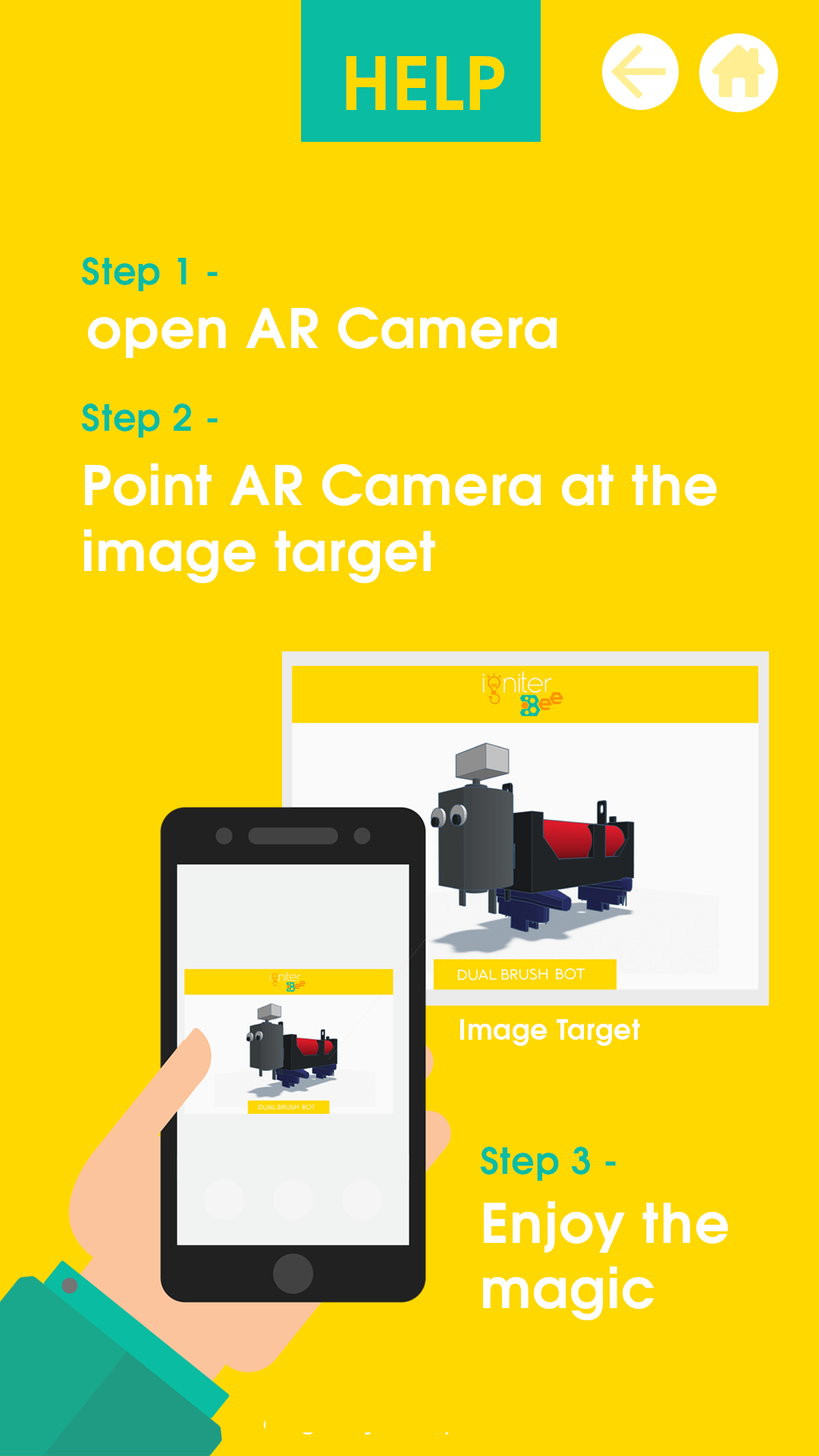
<style>
.page{position:relative;width:819px;height:1456px;background:#ffd800}
.page>*{position:absolute;margin:0}
.t1{font:72.8px "TeXGyreAdventor-Bold";letter-spacing:0.02em;color:#ffd800}
.t2{font:36.4px "TeXGyreAdventor-Bold";letter-spacing:0.02em;color:#0abca1}
.t3{font:54.6px "TeXGyreAdventor-Bold";letter-spacing:0.02em;color:#ffffff}
.t4{font:27.3px "TeXGyreAdventor-Bold";letter-spacing:0.02em;color:#ffffff}
</style>
<div class="page">
<p class="t1" style="left:346px;top:56px;width:158px;height:54px">HELP</p>
<p class="t2" style="left:81px;top:257px;width:137px;height:34px">Step 1 -</p>
<p class="t3" style="left:88px;top:307px;width:469px;height:51px">open AR Camera</p>
<p class="t2" style="left:81px;top:403px;width:137px;height:35px">Step 2 -</p>
<p class="t3" style="left:84px;top:463px;width:633px;height:120px">Point AR Camera at the image target</p>
<p class="t4" style="left:460px;top:1019px;width:180px;height:27px">Image Target</p>
<p class="t2" style="left:480px;top:1147px;width:136px;height:34px">Step 3 -</p>
<p class="t3" style="left:483px;top:1201px;width:245px;height:119px">Enjoy the magic</p>
</div>
